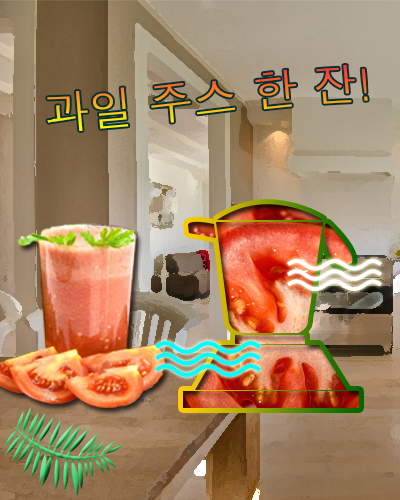
<style>
.page{position:relative;width:400px;height:500px}
.page>*{position:absolute;margin:0}
.t1{font:44.8px "Dotum"}
</style>
<div class="page">
<p class="t1" style="left:47px;top:65px;width:321px;height:66px;rotate:-5deg">과일 주스 한 잔!</p>
</div>
